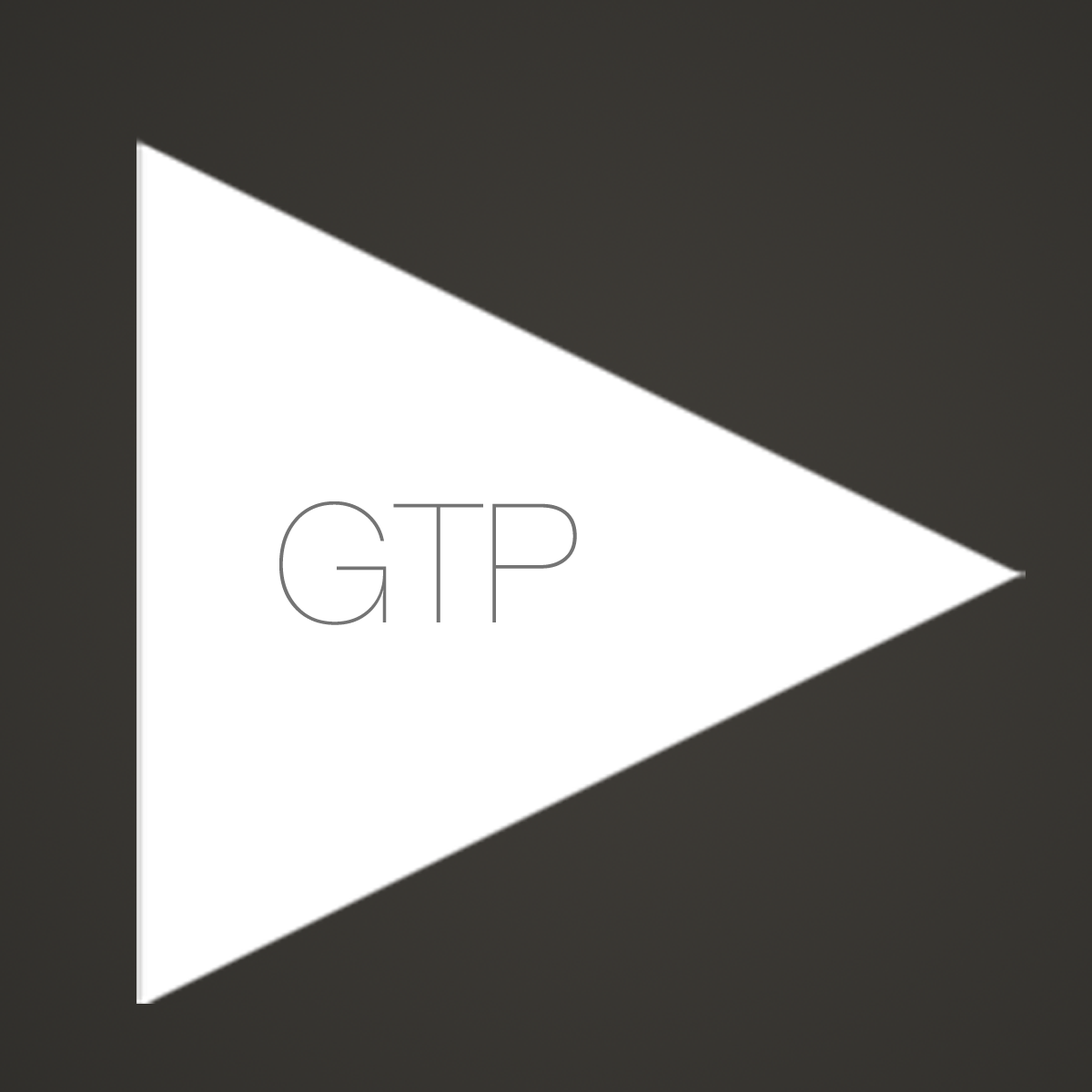
<style>
.page{position:relative;width:1092px;height:1092px;background:#ffffff}
.page>*{position:absolute;margin:0}
.t1{font:166px "HelveticaNeueCyr-UltraLight";letter-spacing:0.017em;color:#747474}
</style>
<div class="page">
<p class="t1" style="left:279px;top:501px;width:298px;height:124px">GTP</p>
</div>
